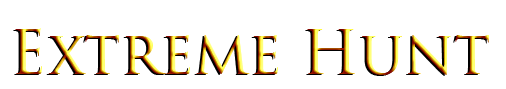
<style>
.page{position:relative;width:506px;height:89px;background:#ffffff}
.page>*{position:absolute;margin:0}
.t1{font:60px "TrajanPro-Regular"}
</style>
<div class="page">
<p class="t1" style="left:15px;top:28px;width:474px;height:47px">Extreme Hunt</p>
</div>
